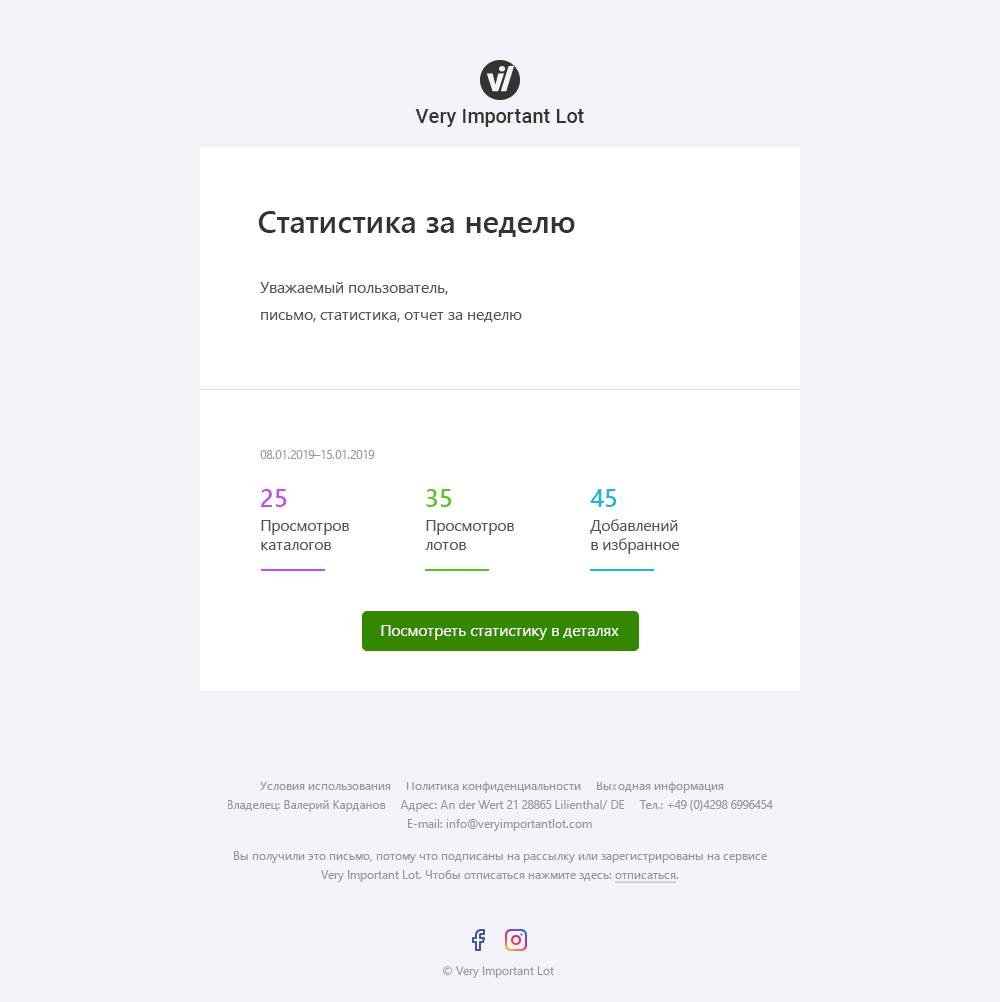
<style>
.page{position:relative;width:1000px;height:1002px;background:#f3f3f9}
.page>*{position:absolute;margin:0}
.t1{font:20px "Roboto-Medium";color:#333333}
.t2{font:31px "SegoeUI-Semibold";color:#333333}
.t3{font:16px/27px "SegoeUI";color:#555555}
.t4{font:12px "SegoeUI";color:#999999}
.t5{font:16px "SegoeUI";color:#555555}
.t6{font:25px "SegoeUI-Semibold";color:#c14fe8}
.t7{font:25px "SegoeUI-Semibold";color:#58c423}
.t8{font:25px "SegoeUI-Semibold";color:#16bbd4}
.t9{font:16px "SegoeUI";color:#ffffff}
</style>
<div class="page">
<p class="t1" style="left:415px;top:109px;width:169px;height:18px">Very Important Lot</p>
<p class="t2" style="left:258px;top:211px;width:317px;height:26px">Статистика за неделю</p>
<p class="t3" style="left:260px;top:282px;width:262px;height:40px">Уважаемый пользователь,<br>письмо, статистика, отчет за неделю</p>
<p class="t4" style="left:260px;top:450px;width:115px;height:9px">08.01.2019–15.01.2019</p>
<p class="t5" style="left:261px;top:489px;width:88px;height:61px"><span class="t6">25<br></span>Просмотров<br>каталогов</p>
<p class="t5" style="left:425px;top:489px;width:89px;height:61px"><span class="t7">35<br></span>Просмотров<br>лотов</p>
<p class="t5" style="left:590px;top:489px;width:90px;height:65px"><span class="t8">45<br></span>Добавлений<br>в избранное</p>
<p class="t9" style="left:381px;top:625px;width:238px;height:15px">Посмотреть статистику в деталях</p>
</div>
